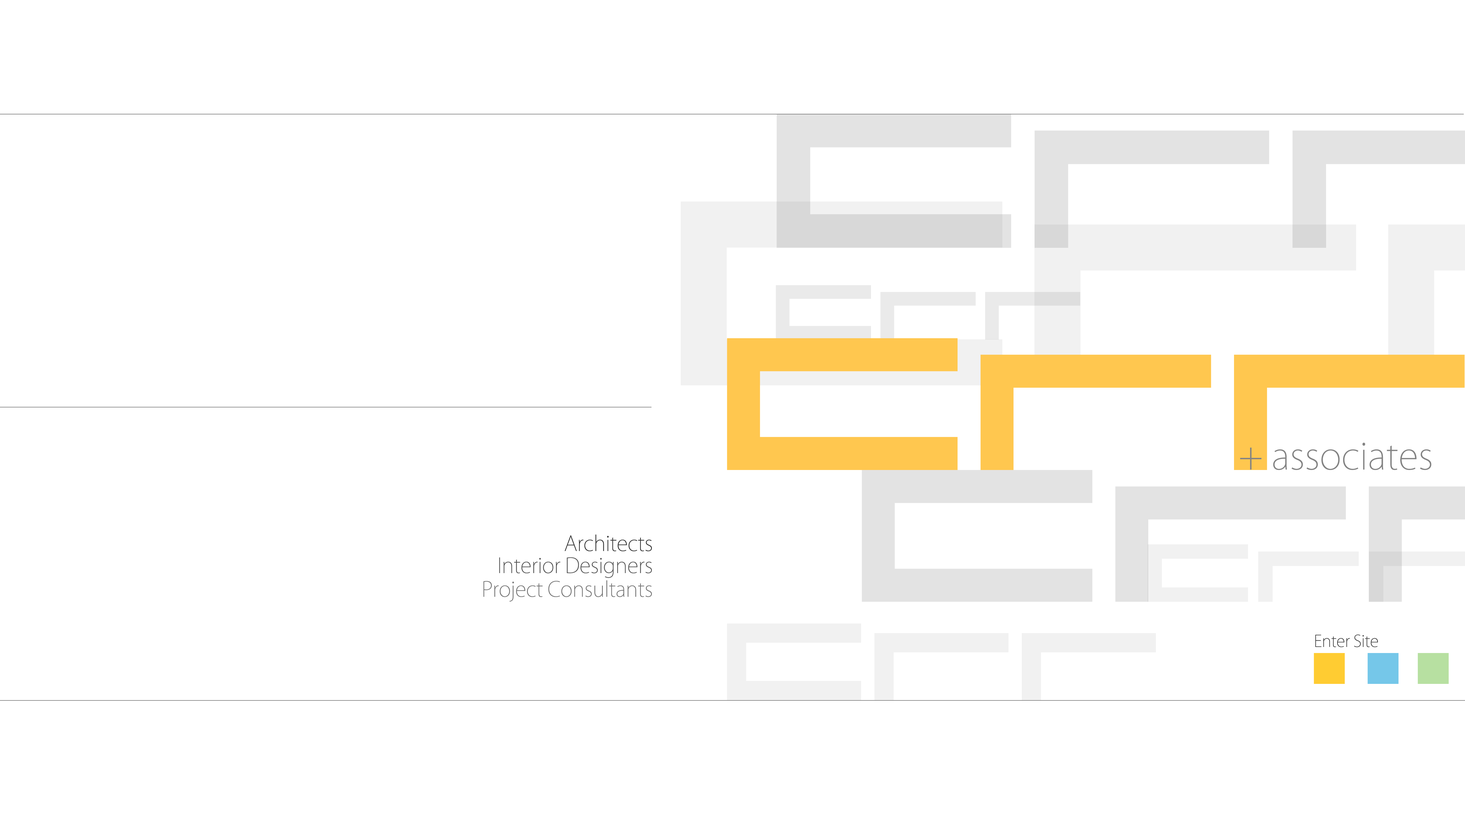
<style>
.page{position:relative;width:1465px;height:814px;background:#ffffff}
.page>*{position:absolute;margin:0}
.t1{font:81.5px "04b31";letter-spacing:-0.05em;color:#eaeaea}
.t2{font:197.5px "04b31";letter-spacing:-0.05em;color:#ffc74f}
.t3{font:36.8px "KozGoPr6N-ExtraLight";color:#838383}
.t4{font:20.7px "KozGoPr6N-ExtraLight";letter-spacing:-0.01em;color:#323232}
.t5{font:20.7px "KozGoPr6N-ExtraLight";letter-spacing:-0.01em;color:#525252}
.t6{font:20.7px "KozGoPr6N-ExtraLight";letter-spacing:-0.01em;color:#727272}
.t7{font:114.8px "04b31";letter-spacing:-0.05em;color:#f1f1f1}
.t8{font:16.1px "KozGoPr6N-ExtraLight";letter-spacing:-0.01em;color:#323232}
</style>
<div class="page">
<p class="t1" style="left:776px;top:285px;width:304px;height:55px">Crr</p>
<p class="t2" style="left:727px;top:338px;width:738px;height:132px">Crr</p>
<p class="t3" style="left:1240px;top:443px;width:191px;height:27px">+ associates</p>
<p class="t4" style="left:564px;top:534px;width:88px;height:17px">Architects</p>
<p class="t5" style="left:499px;top:557px;width:153px;height:21px">Interior Designers</p>
<p class="t6" style="left:483px;top:580px;width:169px;height:22px">Project Consultants</p>
<p class="t7" style="left:727px;top:623px;width:429px;height:77px">Crr</p>
<p class="t8" style="left:1315px;top:635px;width:63px;height:12px">Enter Site</p>
</div>
